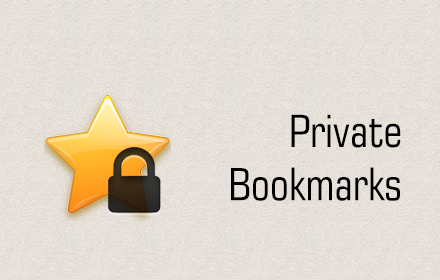
<style>
.page{position:relative;width:440px;height:280px}
.page>*{position:absolute;margin:0}
.t1{font:44.4px "Square721BT-RomanCondensed";color:#000000}
</style>
<div class="page">
<p class="t1" style="left:231px;top:114px;width:170px;height:87px;text-align:right">Private<br>Bookmarks</p>
</div>
